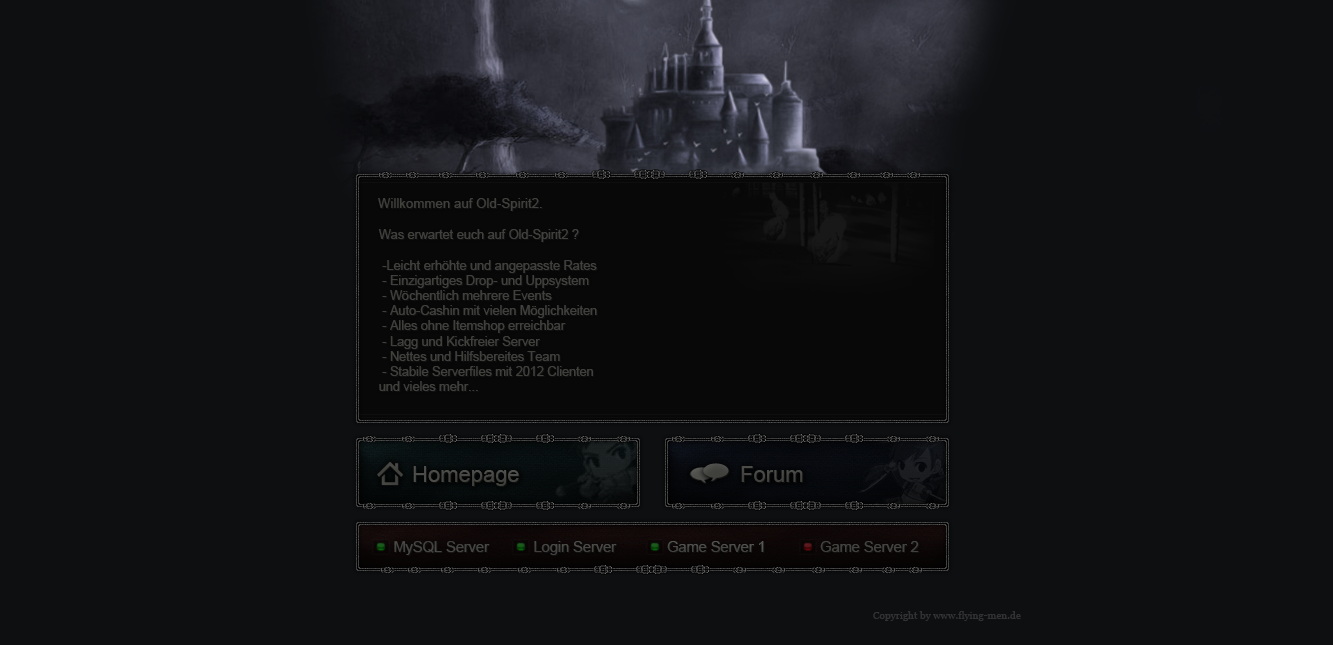
<style>
.page{position:relative;width:1333px;height:645px;background:#0e0f11}
.page>*{position:absolute;margin:0}
.t1{font:13.3px "ArialMT";color:#40403d}
.t2{font:12.6px "ArialMT";color:#40403d}
.t3{font:12.6px "ArialMT";color:#191919}
.t4{font:22px "ArialMT";color:#40403d}
.t5{font:14.5px "ArialMT";color:#40403d}
.t6{font:14.5px "ArialMT"}
.t7{font:14.5px "ArialMT";color:#232321}
.t8{font:10.2px "Georgia";color:#323234}
</style>
<div class="page">
<p class="t1" style="left:378px;top:198px;width:164px;height:13px">Willkommen auf Old-Spirit2.</p>
<p class="t2" style="left:378px;top:229px;width:219px;height:162px">Was erwartet euch auf Old-Spirit2 ?<br><br> -Leicht erhöhte und angepasste Rates<br> - Einzigartiges Drop- und Uppsystem<br> - Wöchentlich mehrere Events <br> - Auto-Cashin mit vielen Möglichkeiten<br> - Alles ohne Itemshop erreichbar <br> - Lagg und Kickfreier Server<br> - Nettes und Hilfsbereites Team<br> - Stabile Serverfiles mit 2012 Clienten<br>und vieles mehr...</p>
<p class="t3" style="left:379px;top:230px;width:219px;height:162px">Was erwartet euch auf Old-Spirit2 ?<br><br> -Leicht erhöhte und angepasste Rates<br> - Einzigartiges Drop- und Uppsystem<br> - Wöchentlich mehrere Events <br> - Auto-Cashin mit vielen Möglichkeiten<br> - Alles ohne Itemshop erreichbar <br> - Lagg und Kickfreier Server<br> - Nettes und Hilfsbereites Team<br> - Stabile Serverfiles mit 2012 Clienten<br>und vieles mehr...</p>
<p class="t4" style="left:413px;top:466px;width:106px;height:20px">Homepage</p>
<p class="t4" style="left:414px;top:467px;width:106px;height:20px">Homepage</p>
<p class="t4" style="left:741px;top:466px;width:62px;height:16px">Forum</p>
<p class="t4" style="left:742px;top:467px;width:62px;height:16px">Forum</p>
<p class="t5" style="left:394px;top:541px;width:96px;height:14px">MySQL Server</p>
<p class="t6" style="left:395px;top:542px;width:95px;height:14px">MySQL Server</p>
<p class="t5" style="left:534px;top:541px;width:83px;height:14px">Login Server</p>
<p class="t7" style="left:535px;top:542px;width:83px;height:14px">Login Server</p>
<p class="t5" style="left:667px;top:541px;width:97px;height:11px">Game Server 1</p>
<p class="t5" style="left:820px;top:541px;width:99px;height:11px">Game Server 2</p>
<p class="t8" style="left:873px;top:611px;width:148px;height:10px">Copyright by www.flying-men.de</p>
</div>
